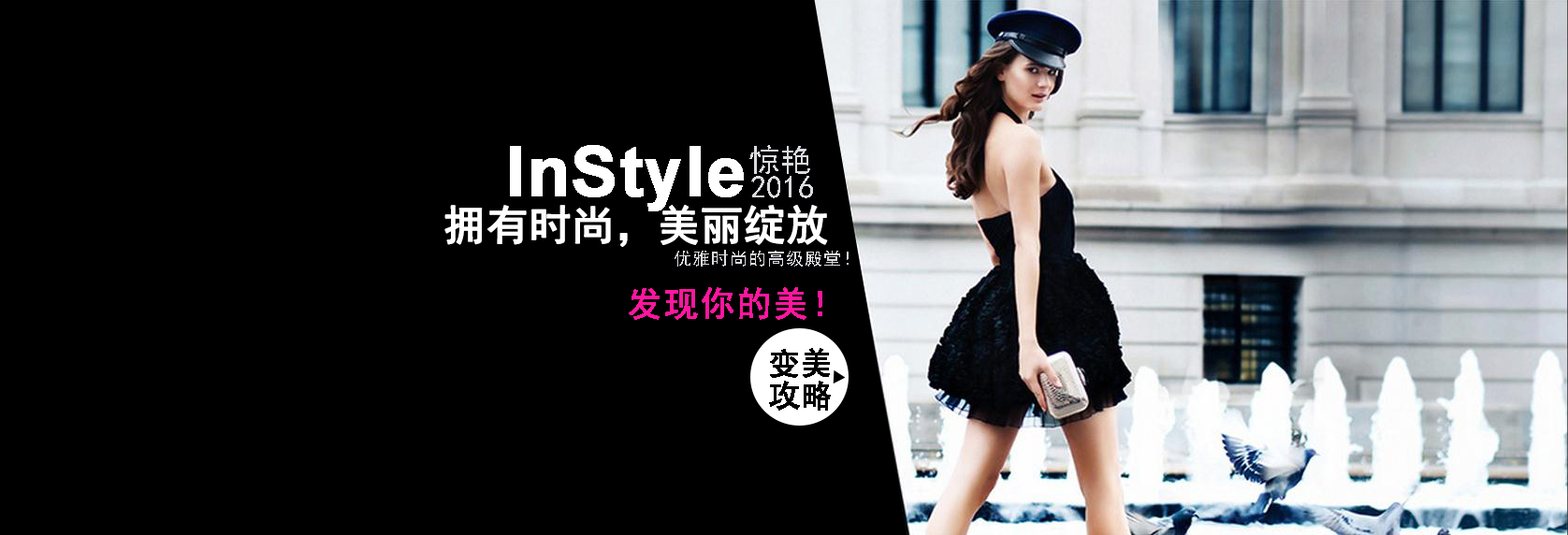
<style>
.page{position:relative;width:1568px;height:535px;background:#000000}
.page>*{position:absolute;margin:0}
.t1{font:69.6px "Arial-BoldMT";color:#ffffff;font-weight:bold}
.t2{font:31.3px "SimHei";color:#dbdce0}
.t3{font:41.8px "SimHei";color:#ffffff;font-weight:bold}
.t4{font:17.4px "SimHei";color:#dbdce0}
.t5{font:34.8px "SimHei";color:#ff169d;font-weight:bold}
</style>
<div class="page">
<p class="t1" style="left:510px;top:145px;width:234px;height:66px">InStyle</p>
<p class="t2" style="left:749px;top:145px;width:61px;height:29px">惊艳</p>
<p class="t2" style="left:751px;top:176px;width:62px;height:22px">2016</p>
<p class="t3" style="left:444px;top:205px;width:384px;height:42px">拥有时尚，美丽绽放</p>
<p class="t4" style="left:675px;top:250px;width:174px;height:17px">优雅时尚的高级殿堂！</p>
<p class="t5" style="left:629px;top:287px;width:193px;height:33px">发现你的美！</p>
</div>
